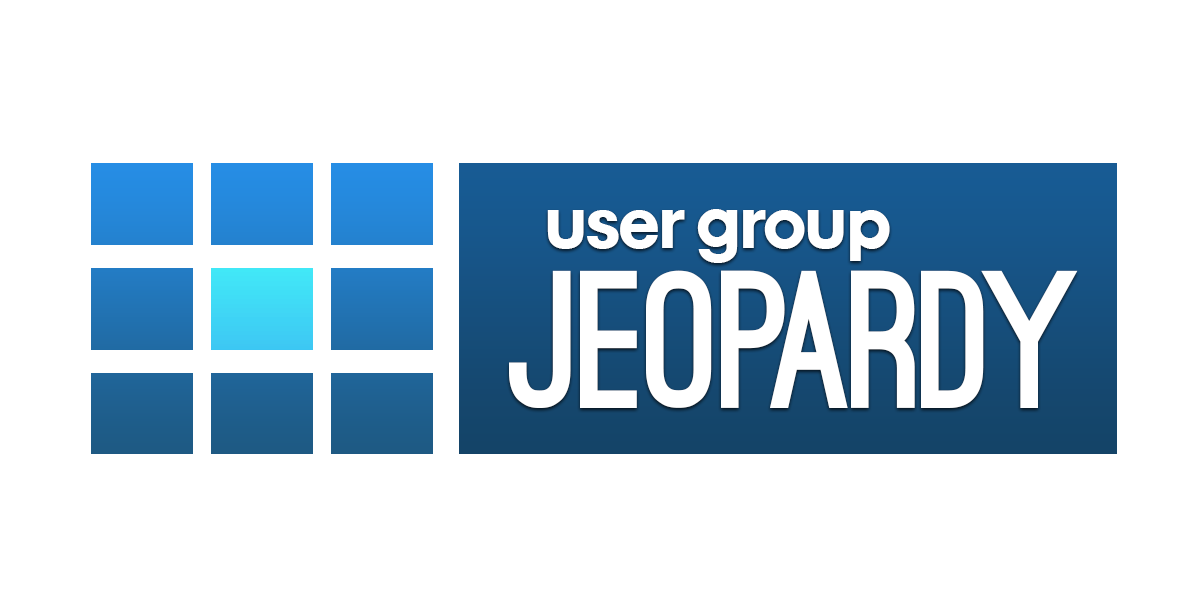
<style>
.page{position:relative;width:1200px;height:600px;background:#ffffff}
.page>*{position:absolute;margin:0}
.t1{font:76.7px "MobilGraphics";color:#ffffff}
.t2{font:185.7px "OstrichSans-Black";color:#ffffff}
</style>
<div class="page">
<p class="t1" style="left:547px;top:209px;width:343px;height:54px">user group</p>
<p class="t2" style="left:509px;top:270px;width:569px;height:138px">JEoPARDY</p>
</div>
